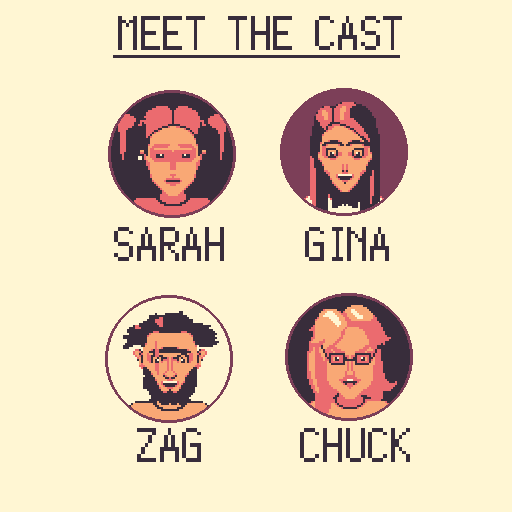
<style>
.page{position:relative;width:512px;height:512px;background:#fff6d3}
.page>*{position:absolute;margin:0}
.t1{font:72px "Silver";color:#382d3b}
</style>
<div class="page">
<p class="t1" style="left:118px;top:16px;width:284px;height:34px">MEET THE CAST</p>
<p class="t1" style="left:114px;top:227px;width:110px;height:34px">SARAH</p>
<p class="t1" style="left:305px;top:227px;width:84px;height:34px">GINA</p>
<p class="t1" style="left:137px;top:428px;width:64px;height:34px">ZAG</p>
<p class="t1" style="left:300px;top:428px;width:110px;height:34px">CHUCK</p>
</div>
